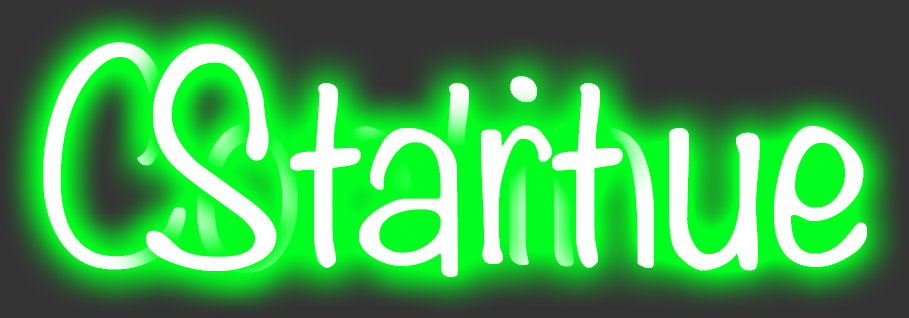
<style>
.page{position:relative;width:909px;height:318px}
.page>*{position:absolute;margin:0}
.t1{font:254.2px "Noteworthy-Light";color:#ffffff}
</style>
<div class="page">
<p class="t1" style="left:43px;top:42px;width:824px;height:231px">Continue</p>
<p class="t1" style="left:43px;top:42px;width:824px;height:231px">Continue</p>
<p class="t1" style="left:146px;top:43px;width:477px;height:234px">Start</p>
<p class="t1" style="left:146px;top:43px;width:477px;height:234px">Start</p>
</div>
